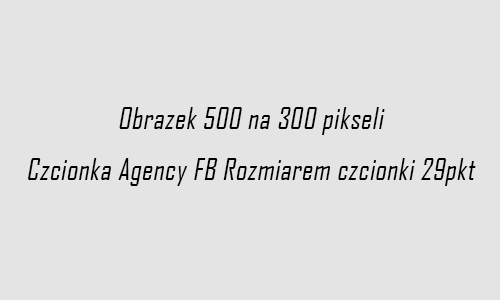
<style>
.page{position:relative;width:500px;height:300px;background:#e4e4e4}
.page>*{position:absolute;margin:0}
.t1{font:29px/50.6px "AgencyFB-Reg";letter-spacing:0.02em;color:#000000;font-style:italic}
</style>
<div class="page">
<p class="t1" style="left:28px;top:107px;width:448px;height:79px;text-align:center">Obrazek 500 na 300 pikseli<br>Czcionka Agency FB Rozmiarem czcionki 29pkt</p>
</div>
